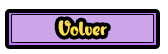
<style>
.page{position:relative;width:168px;height:54px;background:#ffffff}
.page>*{position:absolute;margin:0}
.t1{font:21.3px "MagicOwl-PersonalUse";color:#ffde43}
</style>
<div class="page">
<p class="t1" style="left:58px;top:20px;width:49px;height:16px">Volver</p>
</div>
